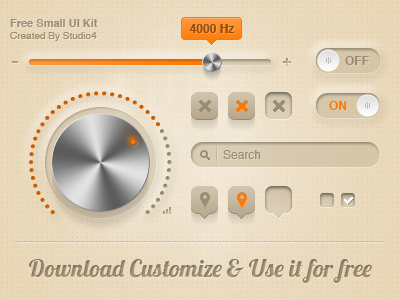
<style>
.page{position:relative;width:400px;height:300px}
.page>*{position:absolute;margin:0}
.t1{font:10px "Helvetica";color:#9a8e76}
.t2{font:11px "Helvetica-Bold";color:#9a8e76}
.t3{font:12px "Helvetica-Bold";color:#934d0e}
.t4{font:12px "Helvetica-Bold";color:#9a8e76}
.t5{font:12px "Helvetica-Bold";color:#ff7800}
.t6{font:12px "Helvetica";color:#9a8e76}
.t7{font:24px "Lobster1.4";color:#96886e}
</style>
<div class="page">
<p class="t1" style="left:10px;top:19px;width:88px;height:22px"><span class="t2">Free Small UI Kit<br></span>Created By Studio4</p>
<p class="t3" style="left:189px;top:24px;width:46px;height:9px">4000 Hz</p>
<p class="t4" style="left:345px;top:56px;width:24px;height:9px">OFF</p>
<p class="t5" style="left:329px;top:101px;width:18px;height:9px">ON</p>
<p class="t6" style="left:223px;top:150px;width:38px;height:9px">Search</p>
<p class="t7" style="left:29px;top:259px;width:343px;height:24px">Download Customize &amp; Use it for free</p>
</div>
